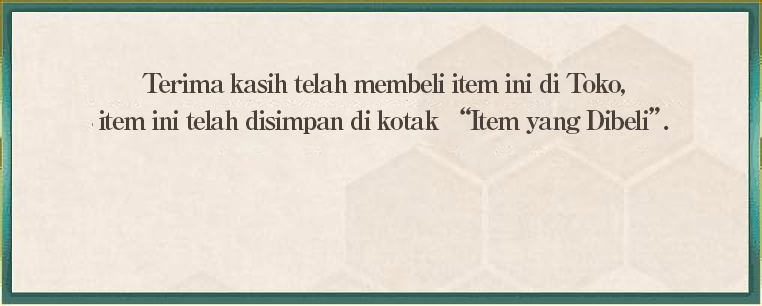
<style>
.page{position:relative;width:762px;height:306px}
.page>*{position:absolute;margin:0}
.t1{font:27px/37px "RyuminPro-ExBold";letter-spacing:-0.08em;color:#4a4037}
</style>
<div class="page">
<p class="t1" style="left:99px;top:73px;width:570px;height:61px;text-align:center">Terima kasih telah membeli item ini di Toko,<br>item ini telah disimpan di kotak “Item yang Dibeli”.</p>
</div>
